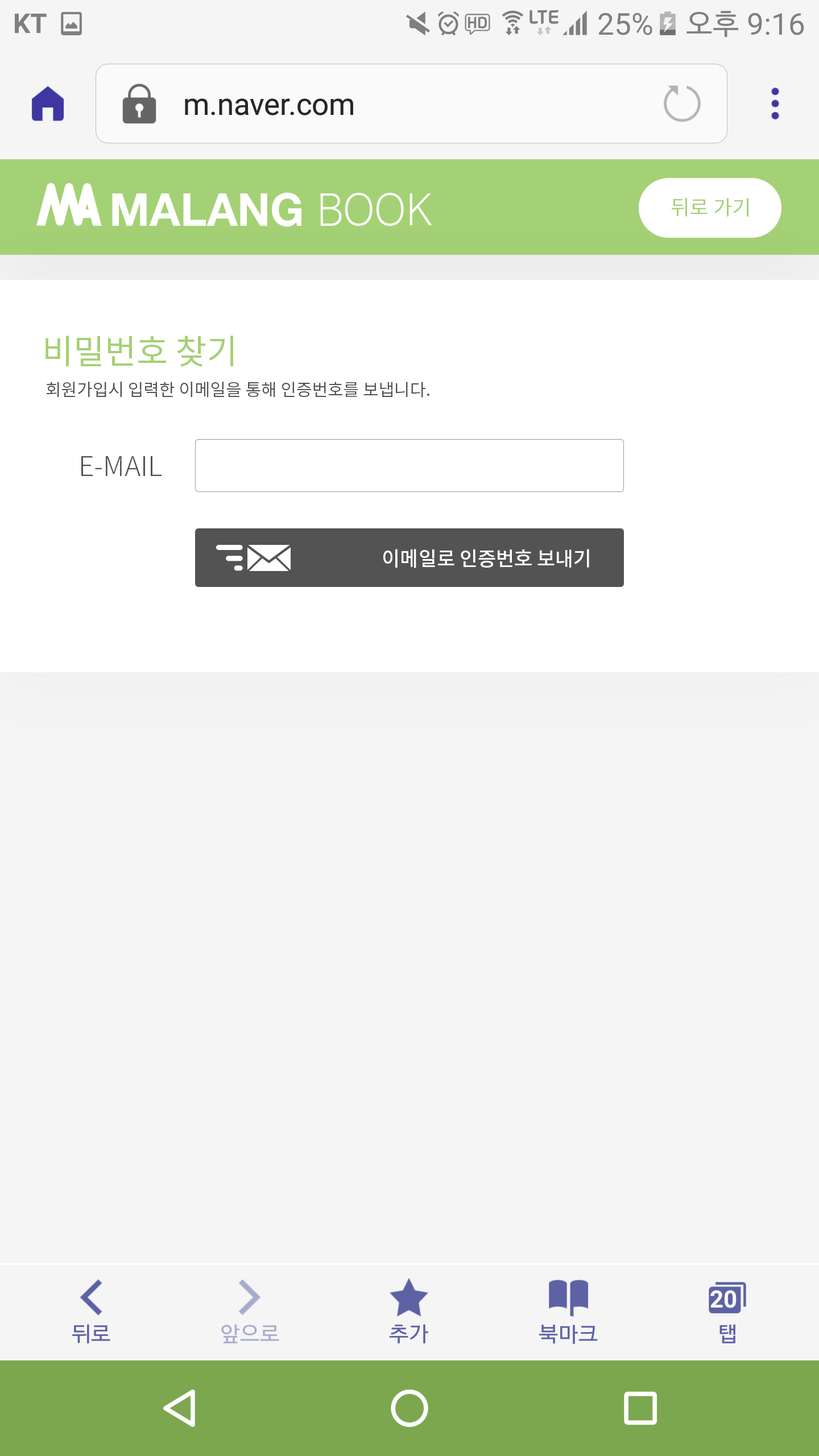
<style>
.page{position:relative;width:819px;height:1456px;background:#f5f5f5}
.page>*{position:absolute;margin:0}
.t1{font:20.5px "NotoSansCJKkr-Regular";color:#a4d175}
.t2{font:34.1px "NotoSansCJKkr-Regular";color:#a4d175}
.t3{font:17.1px "NotoSansCJKkr-Regular";color:#535353}
.t4{font:27.3px "NotoSansCJKkr-Light";color:#535353}
.t5{font:19.9px "NotoSansCJKkr-Medium";color:#ffffff}
</style>
<div class="page">
<p class="t1" style="left:672px;top:198px;width:76px;height:19px">뒤로 가기</p>
<p class="t2" style="left:45px;top:336px;width:188px;height:31px">비밀번호 찾기</p>
<p class="t3" style="left:46px;top:382px;width:383px;height:16px">회원가입시 입력한 이메일을 통해 인증번호를 보냅니다.</p>
<p class="t4" style="left:81px;top:456px;width:81px;height:20px">E-MAIL</p>
<p class="t5" style="left:383px;top:549px;width:206px;height:19px">이메일로 인증번호 보내기</p>
</div>
